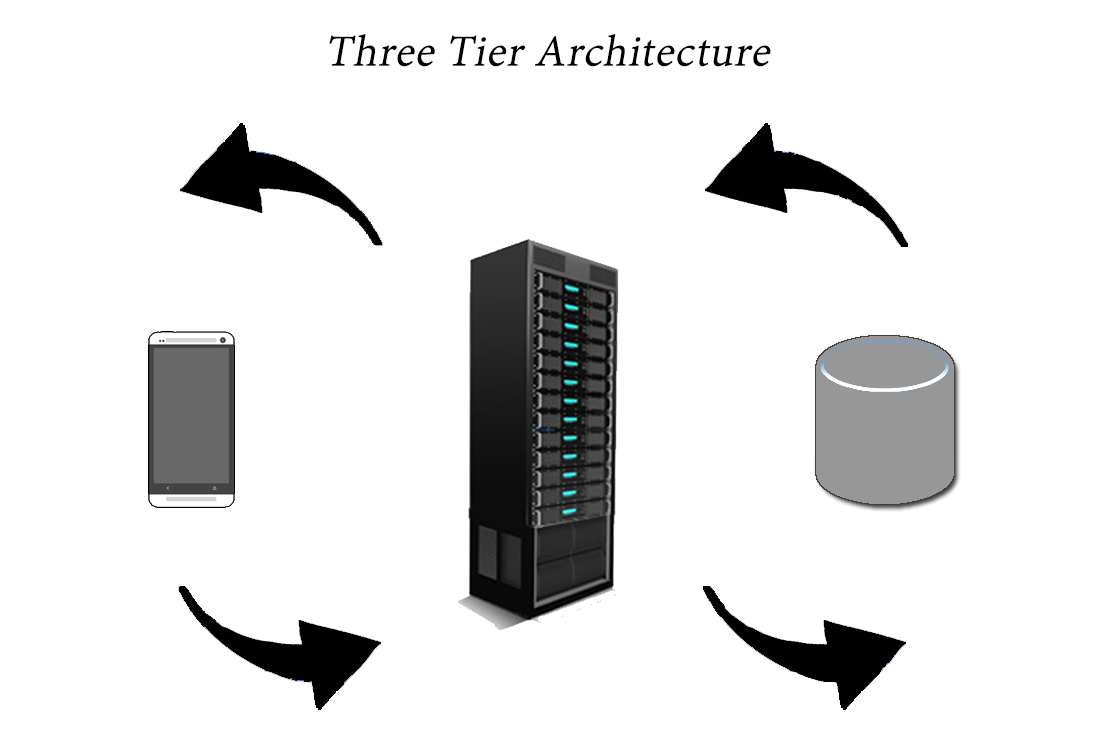
<style>
.page{position:relative;width:1100px;height:750px;background:#ffffff}
.page>*{position:absolute;margin:0}
.t1{font:48px "AdobeDevanagari-Regular";letter-spacing:0.02em;color:#010000;font-style:italic}
</style>
<div class="page">
<p class="t1" style="left:329px;top:34px;width:442px;height:33px">Three Tier Architecture</p>
</div>
